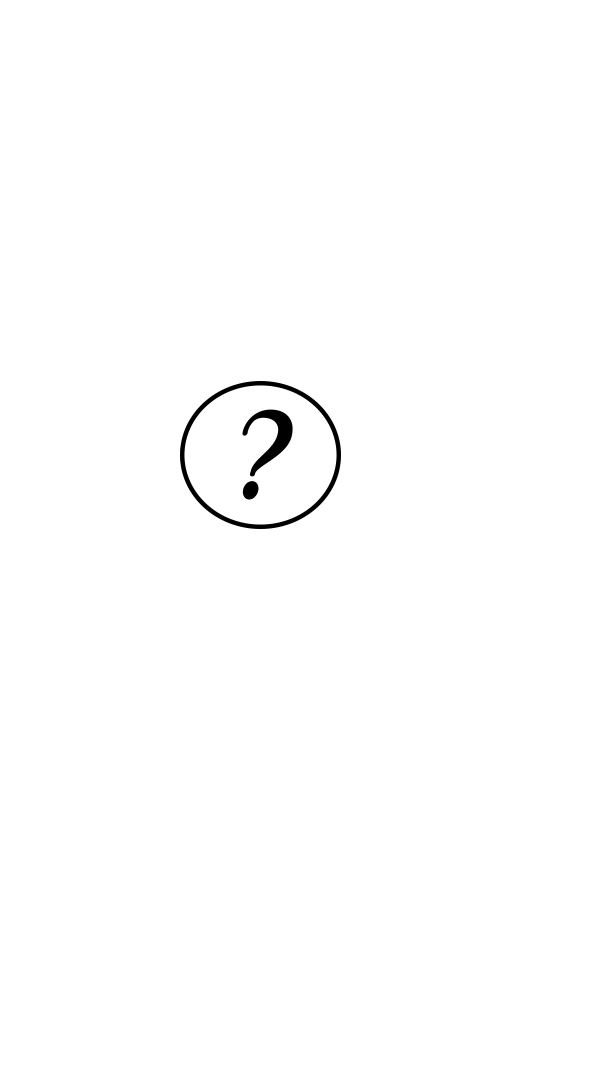
<style>
.page{position:relative;width:589px;height:1080px;background:#ffffff}
.page>*{position:absolute;margin:0}
.t1{font:150px "AnotherDayRegular";letter-spacing:-0.001em;color:#000000}
</style>
<div class="page">
<p class="t1" style="left:242px;top:409px;width:51px;height:91px">?</p>
</div>
